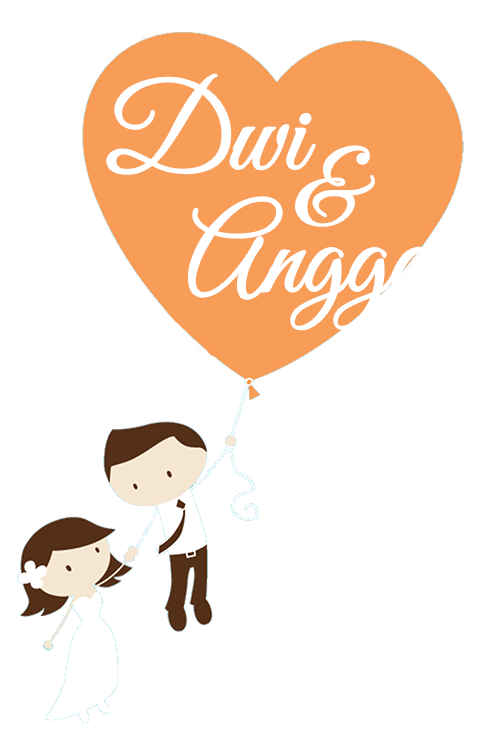
<style>
.page{position:relative;width:478px;height:755px;background:#ffffff}
.page>*{position:absolute;margin:0}
.t1{font:119.6px "GreatVibes-Regular";color:#ffffff}
.t2{font:106.2px "GreatVibes-Regular";color:#ffffff}
.t3{font:121.3px "GreatVibes-Regular";color:#ffffff;scale:0.91 1}
</style>
<div class="page">
<p class="t1" style="left:107px;top:74px;width:208px;height:100px">Dwi</p>
<p class="t2" style="left:296px;top:146px;width:78px;height:80px">&amp;</p>
<p class="t3" style="left:188px;top:197px;width:249px;height:133px">Angga</p>
</div>
